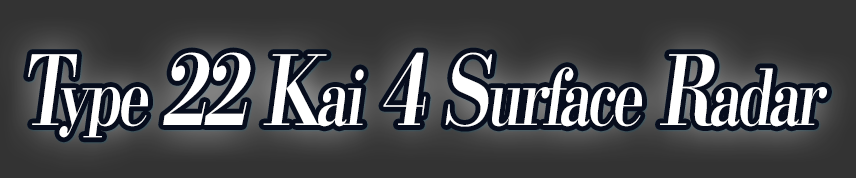
<style>
.page{position:relative;width:856px;height:178px;background:#333333}
.page>*{position:absolute;margin:0}
.t1{font:76.8px "KochoStd-Heavy";letter-spacing:-0.06em;color:#ffffff;font-style:italic;scale:0.75 1}
.t2{font:96px "KochoStd-Heavy";letter-spacing:-0.06em;color:#ffffff;font-style:italic;scale:0.75 1}
</style>
<div class="page">
<p class="t1" style="left:28px;top:52px;width:799px;height:86px"><span class="t2">T</span>ype <span class="t2">22 K</span>ai<span class="t2"> 4 S</span>urface<span class="t2"> R</span>adar</p>
</div>
